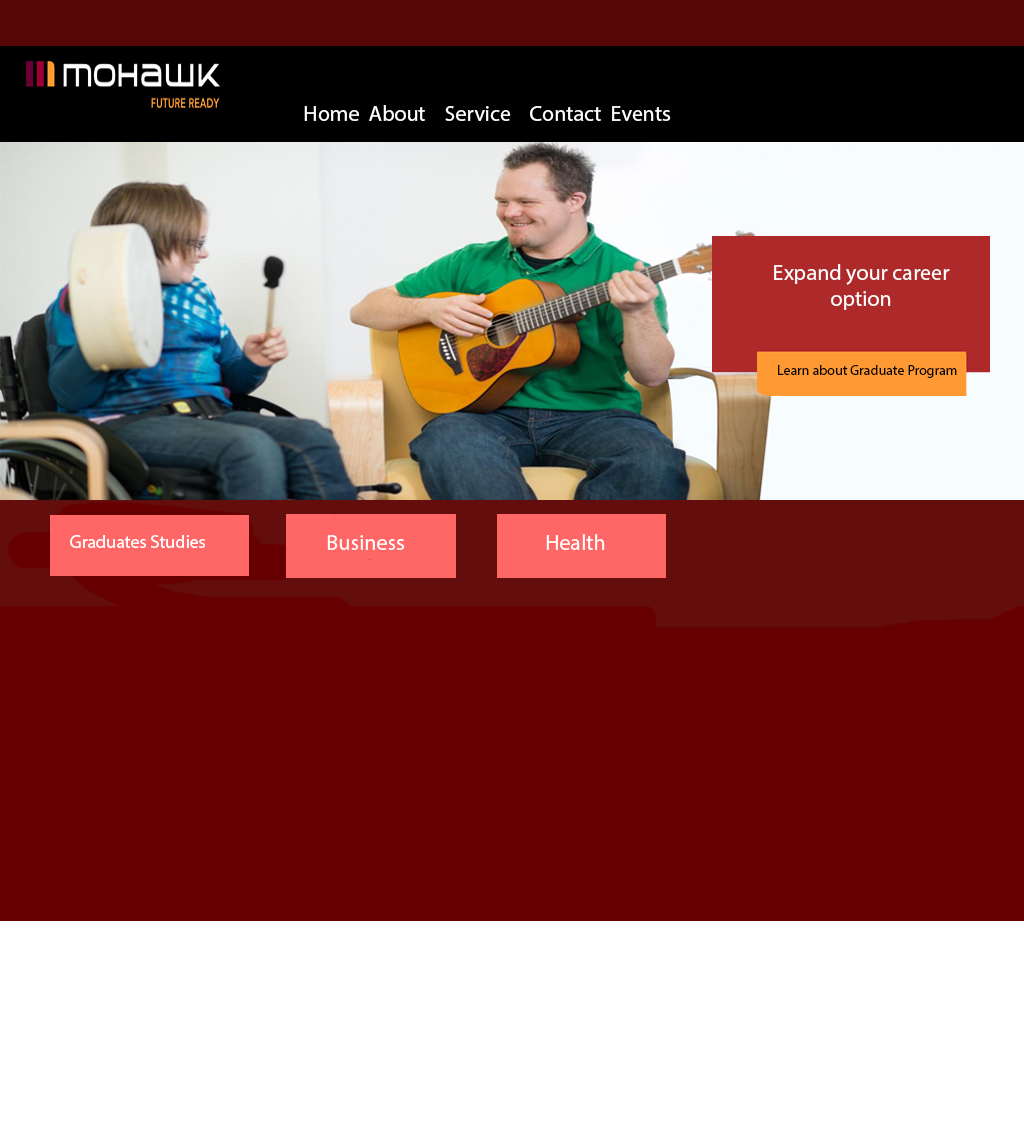
<style>
.page{position:relative;width:1024px;height:1124px;background:#660000}
.page>*{position:absolute;margin:0}
.t1{font:22px "MyriadPro-Regular";color:#ffffff}
.t2{font:14px "MyriadPro-Regular";color:#000000}
.t3{font:18px "MyriadPro-Regular";color:#ffffff}
</style>
<div class="page">
<p class="t1" style="left:304px;top:105px;width:367px;height:16px">Home  About    Service    Contact  Events</p>
<p class="t1" style="left:774px;top:264px;width:176px;height:46px;text-align:center">Expand your career option</p>
<p class="t2" style="left:778px;top:365px;width:179px;height:13px">Learn about Graduate Program</p>
<p class="t1" style="left:546px;top:534px;width:59px;height:16px">Health</p>
<p class="t3" style="left:70px;top:535px;width:135px;height:13px">Graduates Studies</p>
<p class="t1" style="left:327px;top:535px;width:78px;height:15px">Business</p>
</div>
